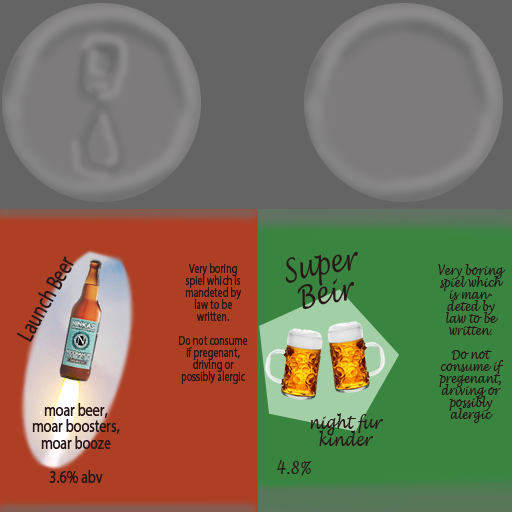
<style>
.page{position:relative;width:512px;height:512px}
.page>*{position:absolute;margin:0}
.t1{font:23.4px "MyriadHebrew-Regular";color:#291819;scale:0.77 1}
.t2{font:31.2px "LucidaHandwriting-Italic";color:#291819;scale:0.77 1}
.t3{font:13px "MyriadHebrew-Regular";color:#291819;scale:0.77 1}
.t4{font:13px "LucidaHandwriting-Italic";color:#291819;scale:0.77 1}
.t5{font:18.2px "MyriadHebrew-Regular";color:#291819;scale:0.77 1}
.t6{font:18.2px "LucidaHandwriting-Italic";color:#291819;scale:0.77 1}
</style>
<div class="page">
<p class="t1" style="left:16px;top:256px;width:58px;height:86px;rotate:-61deg">Launch Beer</p>
<p class="t2" style="left:285px;top:251px;width:73px;height:58px;text-align:center;rotate:-10deg">Super<br>Beir</p>
<p class="t3" style="left:179px;top:263px;width:69px;height:121px;text-align:center">Very boring spiel which is mandeted by law to be written.<br><br>Do not consume if pregenant, driving or possibly alergic</p>
<p class="t4" style="left:438px;top:264px;width:68px;height:159px;text-align:center">Very boring spiel which is mandeted by law to be written.<br><br>Do not consume if pregenant, driving or possibly alergic</p>
<p class="t5" style="left:32px;top:403px;width:88px;height:81px;text-align:center">moar beer,<br>moar boosters,<br>moar booze<br><br>3.6% abv</p>
<p class="t6" style="left:310px;top:413px;width:73px;height:33px;text-align:center">night fur kinder</p>
<p class="t6" style="left:277px;top:460px;width:35px;height:16px">4.8%</p>
</div>
